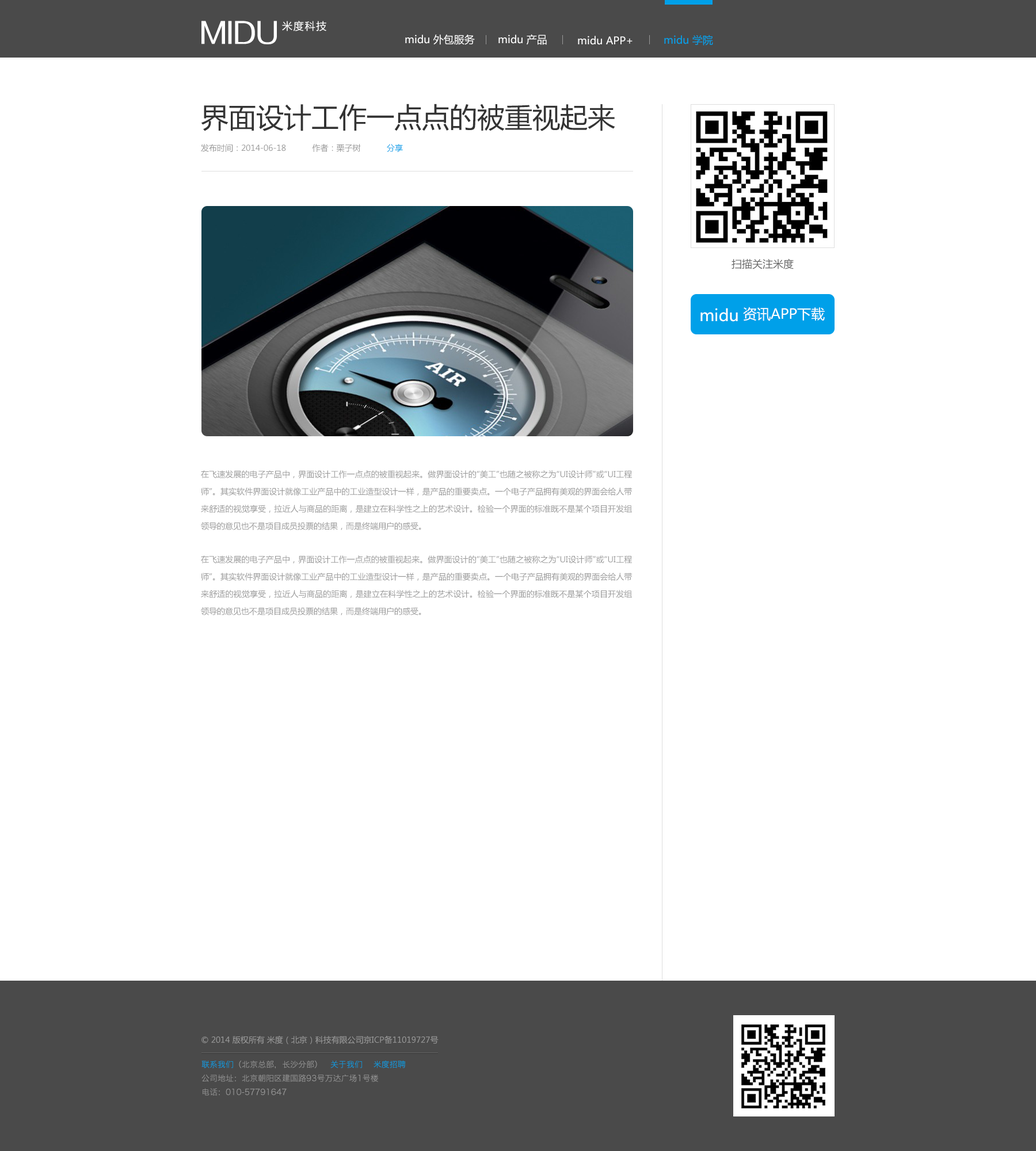
<style>
.page{position:relative;width:1036px;height:1151px;background:#ffffff}
.page>*{position:absolute;margin:0}
.t1{font:27.6px "FZZZHUNHJW--GB1-0";color:#ffffff}
.t2{font:10.4px "MicrosoftYaHei";letter-spacing:0.1em;color:#ffffff}
.t3{font:10.4px "MicrosoftYaHei";color:#ffffff}
.t4{font:10.4px "MicrosoftYaHei";color:#00a0e9}
.t5{font:27.6px "MicrosoftYaHei";color:#333333}
.t6{font:8.1px "MicrosoftYaHei";color:#999999}
.t7{font:8.1px "MicrosoftYaHei";color:#00a0e9}
.t8{font:10.4px "MicrosoftYaHei";color:#666666}
.t9{font:13.8px "MicrosoftYaHei";color:#ffffff}
.t10{font:16.1px "MicrosoftYaHei";color:#ffffff}
.t11{font:8.1px/17.3px "MicrosoftYaHei";color:#999999}
.t12{font:8.1px/13.8px "HiraginoSansGB-W3";color:#999999}
.t13{font:8.1px/13.8px "HiraginoSansGB-W3";color:#00a0e9}
</style>
<div class="page">
<p class="t1" style="left:201px;top:21px;width:76px;height:23px">MIDU</p>
<p class="t2" style="left:282px;top:21px;width:44px;height:10px">米度科技</p>
<p class="t3" style="left:405px;top:35px;width:70px;height:10px">midu 外包服务</p>
<p class="t3" style="left:498px;top:34px;width:49px;height:11px">midu 产品</p>
<p class="t3" style="left:578px;top:36px;width:55px;height:9px">midu APP+</p>
<p class="t4" style="left:664px;top:35px;width:49px;height:10px">midu 学院</p>
<p class="t5" style="left:201px;top:104px;width:414px;height:27px">界面设计工作一点点的被重视起来</p>
<p class="t6" style="left:201px;top:144px;width:202px;height:8px">发布时间：2014-06-18           作者：栗子树           <span class="t7">分享</span></p>
<p class="t8" style="left:731px;top:258px;width:63px;height:11px">扫描关注米度</p>
<p class="t9" style="left:700px;top:307px;width:125px;height:15px"><span class="t10">midu</span> 资讯APP下载</p>
<p class="t11" style="left:201px;top:470px;width:431px;height:145px;text-align:justify">在飞速发展的电子产品中，界面设计工作一点点的被重视起来。做界面设计的“美工”也随之被称之为“UI设计师”或“UI工程师”。其实软件界面设计就像工业产品中的工业造型设计一样，是产品的重要卖点。一个电子产品拥有美观的界面会给人带来舒适的视觉享受，拉近人与商品的距离，是建立在科学性之上的艺术设计。检验一个界面的标准既不是某个项目开发组领导的意见也不是项目成员投票的结果，而是终端用户的感受。<br>在飞速发展的电子产品中，界面设计工作一点点的被重视起来。做界面设计的“美工”也随之被称之为“UI设计师”或“UI工程师”。其实软件界面设计就像工业产品中的工业造型设计一样，是产品的重要卖点。一个电子产品拥有美观的界面会给人带来舒适的视觉享受，拉近人与商品的距离，是建立在科学性之上的艺术设计。检验一个界面的标准既不是某个项目开发组领导的意见也不是项目成员投票的结果，而是终端用户的感受。</p>
<p class="t6" style="left:201px;top:1035px;width:238px;height:10px">© 2014 版权所有 米度（北京）科技有限公司京ICP备11019727号</p>
<p class="t12" style="left:201px;top:1060px;width:205px;height:36px"><span class="t13">联系我们</span>（北京总部，长沙分部）   <span class="t13">关于我们    米度招聘<br></span>公司地址：北京朝阳区建国路93号万达广场1号楼     <br>电话：010-57791647</p>
</div>
